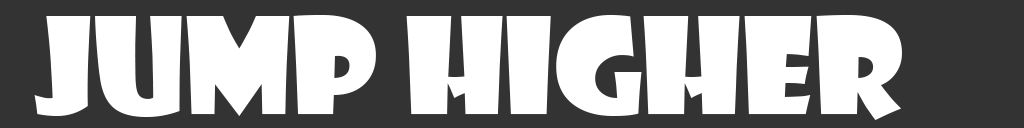
<style>
.page{position:relative;width:1024px;height:128px;background:#333333}
.page>*{position:absolute;margin:0}
.t1{font:129.6px "ShowcardGothic-Reg";color:#ffffff}
</style>
<div class="page">
<p class="t1" style="left:34px;top:15px;width:868px;height:105px">jump higher</p>
</div>
